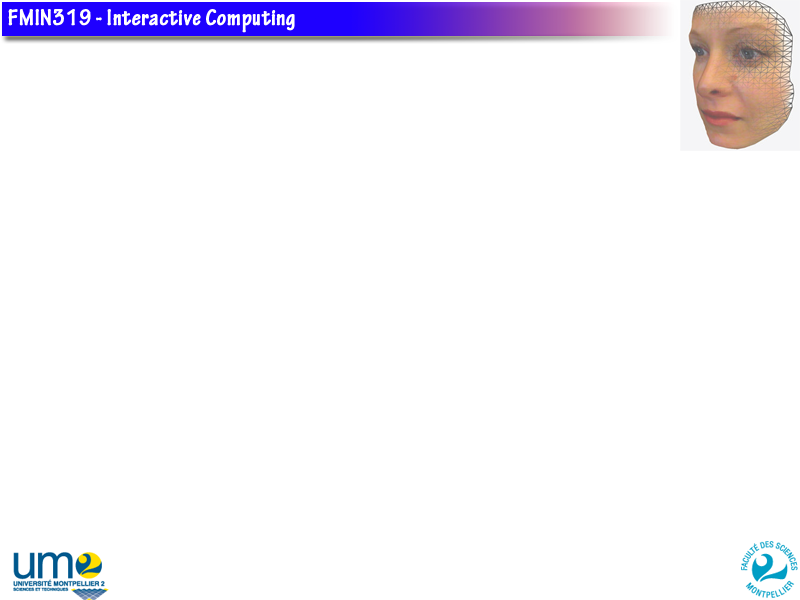
<style>
.page{position:relative;width:800px;height:600px;background:#ffffff}
.page>*{position:absolute;margin:0}
.t1{font:24px "TektonPro-BoldCond";color:#ffffff;font-weight:bold}
</style>
<div class="page">
<p class="t1" style="left:8px;top:9px;width:287px;height:24px">FMIN319 - Interactive Computing</p>
</div>
